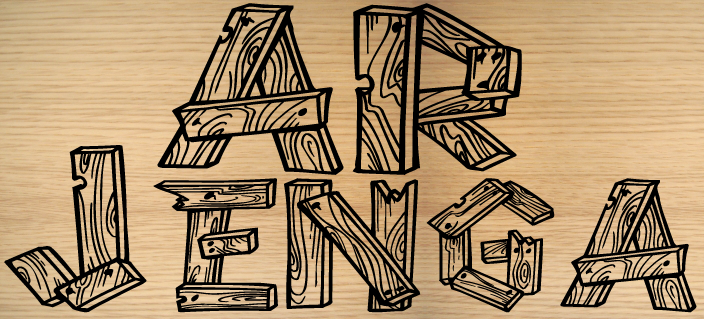
<style>
.page{position:relative;width:704px;height:319px}
.page>*{position:absolute;margin:0}
.t1{font:205.8px "AlphaWood";color:#000000;scale:1.59 1}
.t2{font:200.5px "AlphaWood";color:#000000;scale:1.49 1}
</style>
<div class="page">
<p class="t1" style="left:157px;top:3px;width:365px;height:172px">AR</p>
<p class="t2" style="left:4px;top:145px;width:693px;height:168px">Jenga</p>
</div>
